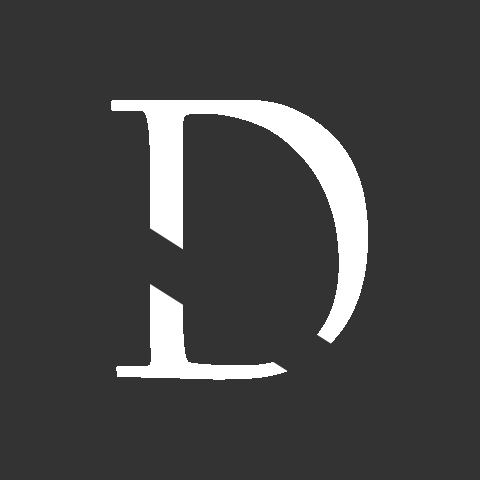
<style>
.page{position:relative;width:480px;height:480px;background:#333333}
.page>*{position:absolute;margin:0}
.t1{font:416.7px "CalifornianFB-Reg";color:#ffffff}
</style>
<div class="page">
<p class="t1" style="left:111px;top:100px;width:257px;height:280px">D</p>
</div>
